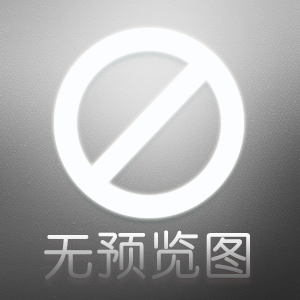
<style>
.page{position:relative;width:300px;height:300px}
.page>*{position:absolute;margin:0}
.t1{font:50.4px "STYuanti-SC-Regular";letter-spacing:0.06em;text-transform:uppercase}
</style>
<div class="page">
<p class="t1" style="left:44px;top:230px;width:206px;height:50px">无预览图</p>
</div>
